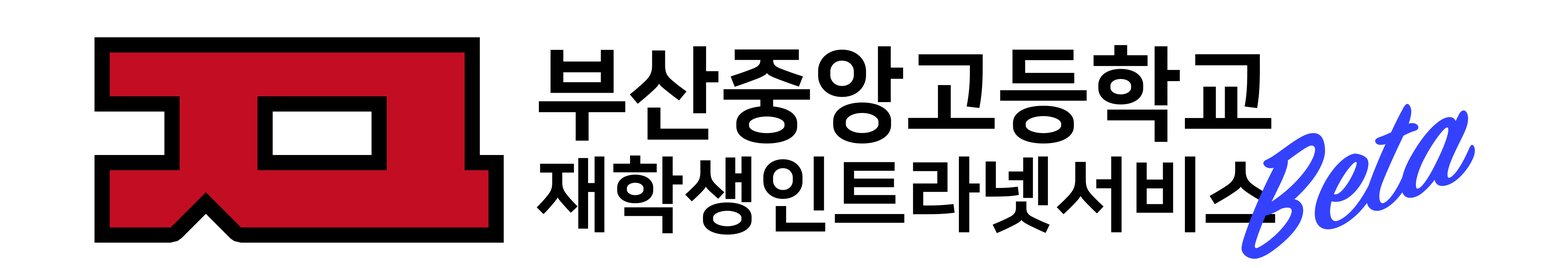
<style>
.page{position:relative;width:1568px;height:268px;background:#ffffff}
.page>*{position:absolute;margin:0}
.t1{font:81.5px/110.4px "NanumSquareOTFEB";color:#000000}
.t2{font:101.4px/110.4px "NanumSquareOTFEB";color:#000000}
.t3{font:163px "SignPainter-HouseScriptSemibold";color:#3442ff;scale:1.07 1}
</style>
<div class="page">
<p class="t1" style="left:537px;top:45px;width:738px;height:190px"><span class="t2">부산중앙고등학교<br></span>재학생인트라넷서비스</p>
<p class="t3" style="left:1241px;top:104px;width:234px;height:155px;rotate:-21deg">Beta</p>
</div>
